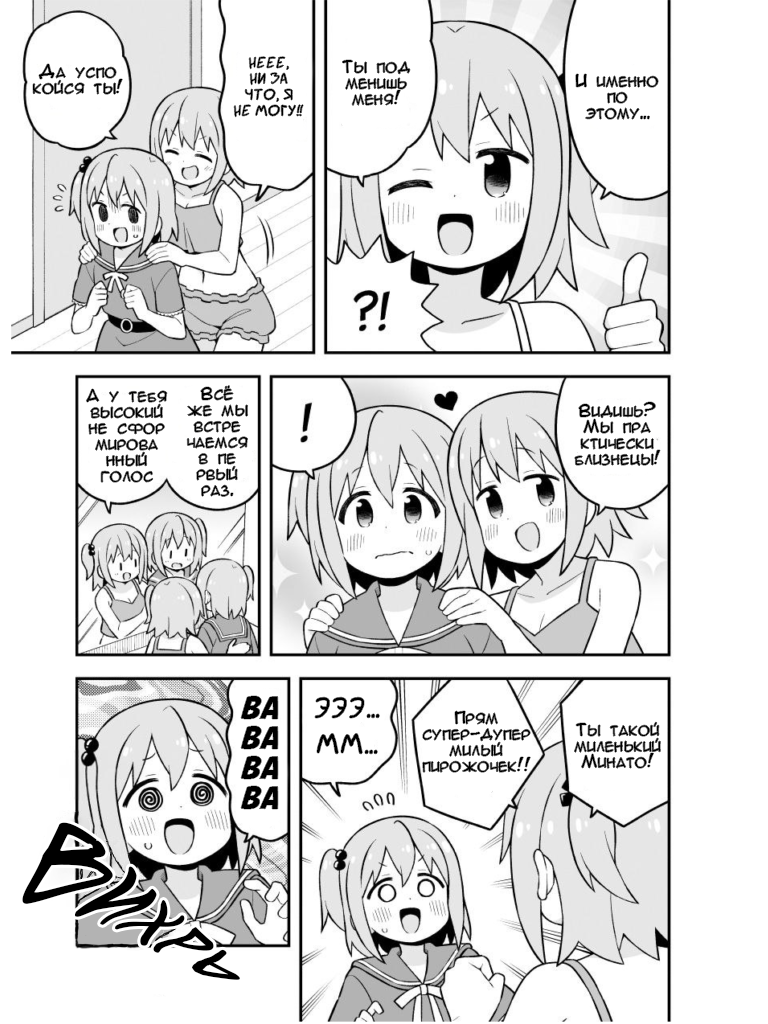
<style>
.page{position:relative;width:768px;height:1024px;background:#ffffff}
.page>*{position:absolute;margin:0}
.t1{font:16px/16px "AnimeAcev3";color:#000000}
.t2{font:16px/16px "SuperWebcomicBros.Rusbyyakustick";color:#000000}
.t3{font:30px/30px "AvengeanceMArusbyaLiNcE";color:#000000}
.t4{font:30px/12px "SuperWebcomicBros.Rusbyyakustick";color:#000000}
.t5{font:90px "SuperWebcomicBros.Rusbyyakustick";color:#000000}
</style>
<div class="page">
<p class="t1" style="left:33px;top:64px;width:90px;height:31px;text-align:center">Да успо<br>койся ты!</p>
<p class="t2" style="left:234px;top:56px;width:70px;height:61px;text-align:center">НЕЕЕ,<br>НИ ЗА<br>ЧТО, Я<br>НЕ МОГУ!!</p>
<p class="t1" style="left:342px;top:60px;width:68px;height:46px;text-align:center">Ты под<br>менишь<br>меня!</p>
<p class="t1" style="left:575px;top:74px;width:84px;height:46px;text-align:center">И именно<br>по<br>этому...</p>
<p class="t1" style="left:86px;top:389px;width:81px;height:94px;text-align:center">А у тебя<br>высокий<br>не сфор<br>мирова<br>нный<br>голос</p>
<p class="t1" style="left:187px;top:385px;width:61px;height:112px;text-align:center">Всё<br>же мы<br>встре<br>чаемся<br>в пе<br>рвый<br>раз.</p>
<p class="t1" style="left:574px;top:402px;width:86px;height:64px;text-align:center">Видишь?<br>Мы пра<br>ктически<br>близнецы!</p>
<p class="t3" style="left:241px;top:696px;width:37px;height:113px;text-align:center">ВА<br>ВА<br>ВА<br>ВА</p>
<p class="t4" style="left:315px;top:697px;width:65px;height:57px;text-align:center">Эээ...<br><br><br>Мм...</p>
<p class="t1" style="left:422px;top:711px;width:109px;height:62px;text-align:center">Прям<br>супер-дупер<br>милый<br>пирожочек!!</p>
<p class="t1" style="left:574px;top:722px;width:87px;height:47px;text-align:center">Ты такой<br>миленький<br>Минато!</p>
<p class="t5" style="left:22px;top:822px;width:218px;height:158px;rotate:30deg">Вихрь</p>
</div>
